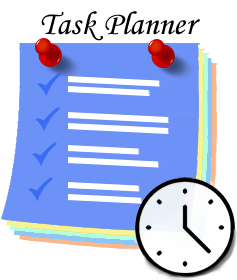
<style>
.page{position:relative;width:237px;height:280px;background:#ffffff}
.page>*{position:absolute;margin:0}
.t1{font:33.3px "MonotypeCorsiva";color:#000000}
</style>
<div class="page">
<p class="t1" style="left:41px;top:11px;width:159px;height:30px">Task Planner</p>
</div>
